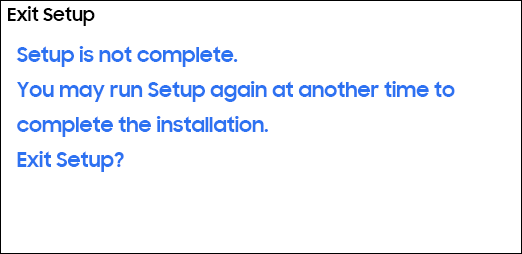
<style>
.page{position:relative;width:522px;height:254px;background:#ffffff}
.page>*{position:absolute;margin:0}
.t1{font:18px "SamsungSharpSans-Bold";color:#000000}
.t2{font:20px "SamsungSharpSans-Bold";color:#2d72f1}
</style>
<div class="page">
<p class="t1" style="left:8px;top:6px;width:87px;height:20px">Exit Setup</p>
<p class="t2" style="left:16px;top:46px;width:439px;height:126px">Setup is not complete.<br>You may run Setup again at another time to<br>complete the installation.<br>Exit Setup?</p>
</div>
